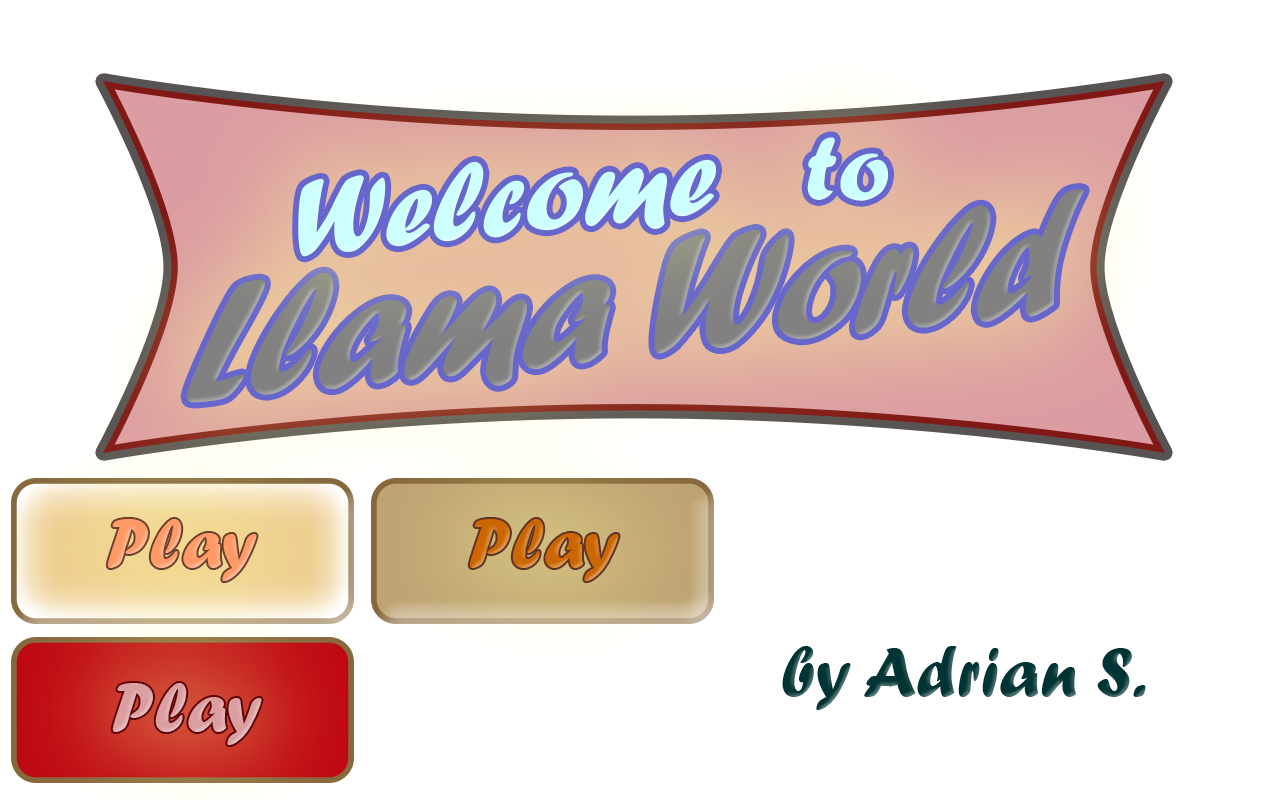
<style>
.page{position:relative;width:1280px;height:800px;background:#ffffff}
.page>*{position:absolute;margin:0}
.t1{font:95.8px "ForteMT";color:#ccffff}
.t2{font:114.3px "ForteMT";color:#ccffff}
.t3{font:180.3px "ForteMT";color:#838381;scale:0.86 1}
.t4{font:72px "ForteMT";color:#ff9966}
.t5{font:72px "ForteMT";color:#cc6600}
.t6{font:72px "ForteMT";color:#003333}
.t7{font:72px "ForteMT";color:#db9ea1}
</style>
<div class="page">
<p class="t1" style="left:807px;top:137px;width:81px;height:64px;rotate:-1deg">to</p>
<p class="t2" style="left:298px;top:159px;width:418px;height:98px;rotate:-6deg">Welcome</p>
<p class="t3" style="left:186px;top:189px;width:898px;height:214px;rotate:-6deg">Llama World</p>
<p class="t4" style="left:107px;top:519px;width:150px;height:62px">Play</p>
<p class="t5" style="left:469px;top:519px;width:150px;height:62px">Play</p>
<p class="t6" style="left:782px;top:646px;width:364px;height:64px">by Adrian S.</p>
<p class="t7" style="left:112px;top:683px;width:150px;height:62px">Play</p>
</div>
